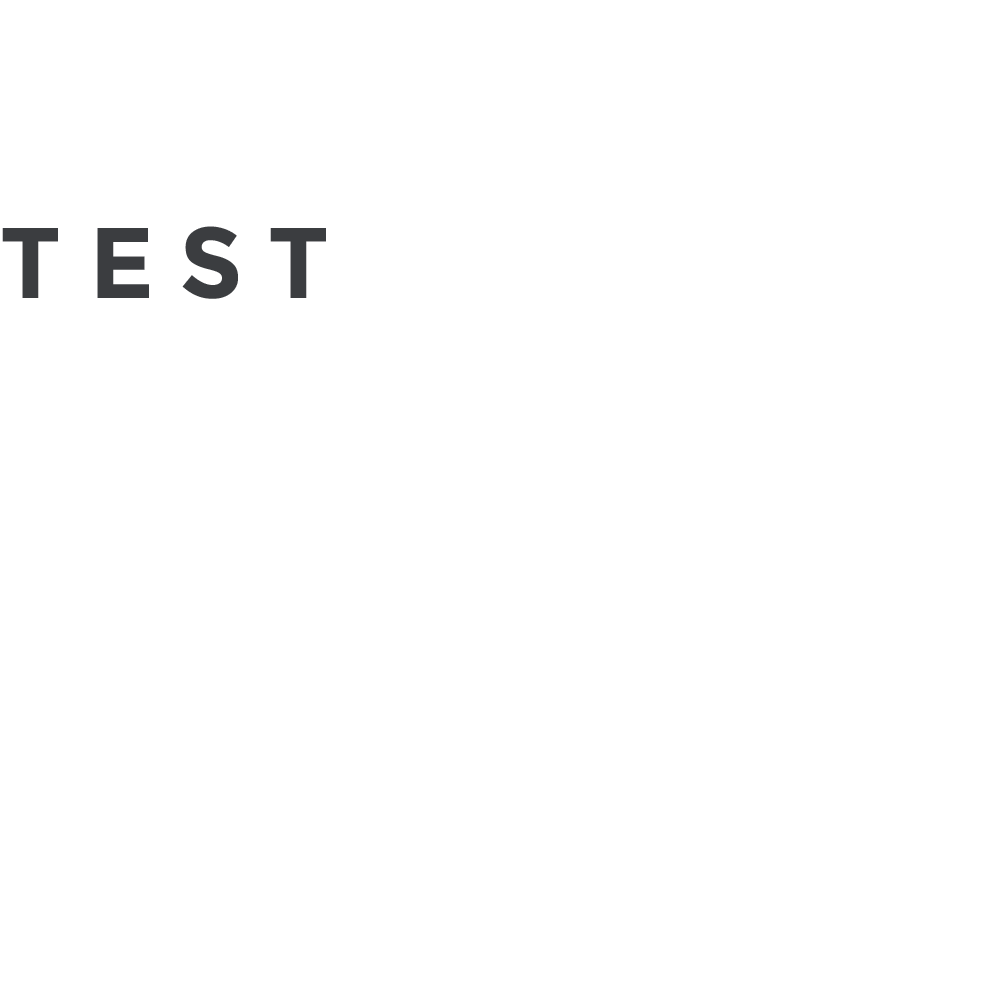
<style>
.page{position:relative;width:1000px;height:1000px;background:#ffffff}
.page>*{position:absolute;margin:0}
.t1{font:100px "Montserrat-Bold";letter-spacing:0.2em;color:#3b3d40}
</style>
<div class="page">
<p class="t1" style="left:2px;top:226px;width:324px;height:73px">TEST</p>
</div>
